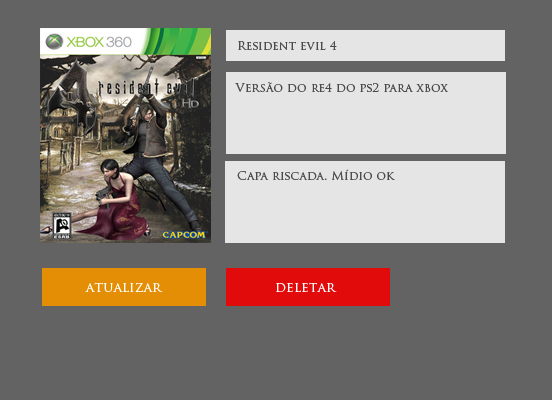
<style>
.page{position:relative;width:552px;height:400px;background:#636363}
.page>*{position:absolute;margin:0}
.t1{font:12px "TrajanPro3-Regular";color:#4b4b4b}
.t2{font:14px "TrajanPro3-Regular";color:#ffffff}
</style>
<div class="page">
<p class="t1" style="left:238px;top:41px;width:99px;height:9px">Resident evil 4</p>
<p class="t1" style="left:235px;top:82px;width:213px;height:10px">Versão do re4 do ps2 para xbox</p>
<p class="t1" style="left:237px;top:169px;width:158px;height:11px">Capa riscada. Mídio ok</p>
<p class="t2" style="left:85px;top:282px;width:78px;height:10px">atualizar</p>
<p class="t2" style="left:276px;top:282px;width:61px;height:10px">deletar</p>
</div>
